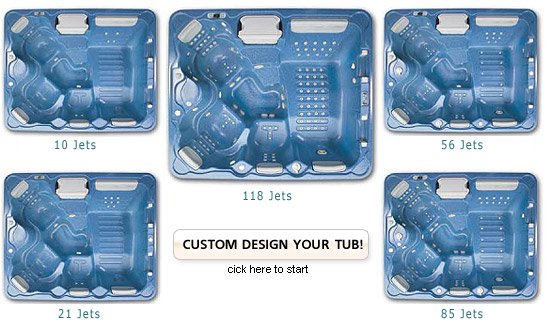
<style>
.page{position:relative;width:550px;height:330px;background:#ffffff}
.page>*{position:absolute;margin:0}
.t1{font:12px "Verdana";letter-spacing:0.1em;color:#24717d;scale:0.83 1}
</style>
<div class="page">
<p class="t1" style="left:55px;top:140px;width:41px;height:10px">10 Jets</p>
<p class="t1" style="left:442px;top:140px;width:41px;height:10px">56 Jets</p>
<p class="t1" style="left:243px;top:191px;width:49px;height:10px">118 Jets</p>
<p class="t1" style="left:58px;top:309px;width:42px;height:10px">21 Jets</p>
<p class="t1" style="left:441px;top:309px;width:42px;height:10px">85 Jets</p>
</div>
